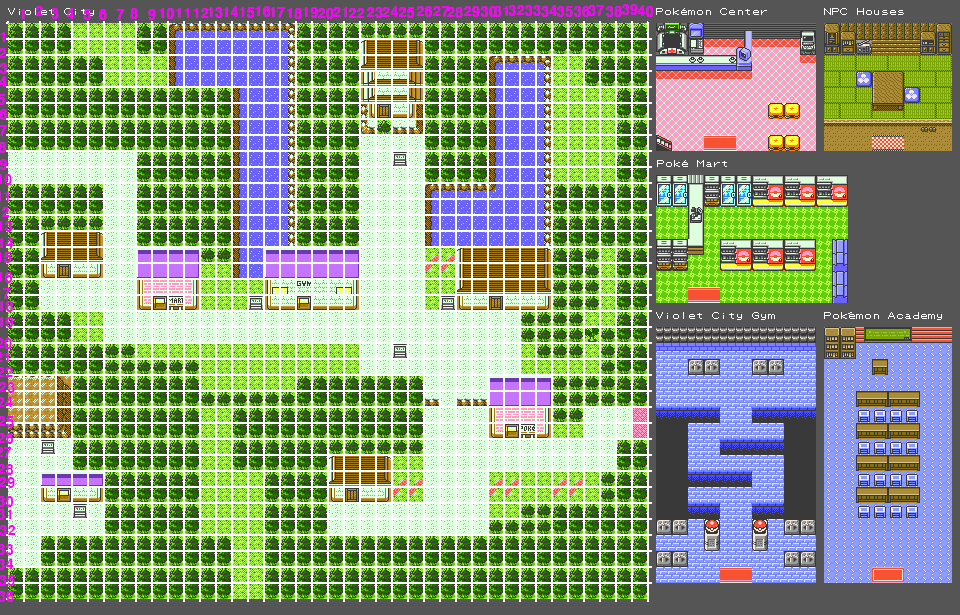
<style>
.page{position:relative;width:960px;height:615px}
.page>*{position:absolute;margin:0}
.t1{font:13.3px "H2gtrE";color:#fc00ff}
.t2{font:13.3px "H2gtrE";color:#e117e4}
</style>
<div class="page">
<p class="t1" style="left:35px;top:6px;width:8px;height:10px">2</p>
<p class="t1" style="left:223px;top:6px;width:15px;height:11px">14</p>
<p class="t1" style="left:255px;top:6px;width:16px;height:11px">16</p>
<p class="t1" style="left:382px;top:6px;width:16px;height:11px">24</p>
<p class="t1" style="left:416px;top:6px;width:16px;height:11px">26</p>
<p class="t1" style="left:433px;top:6px;width:16px;height:11px">27</p>
<p class="t1" style="left:464px;top:6px;width:16px;height:11px">29</p>
<p class="t1" style="left:481px;top:6px;width:16px;height:11px">30</p>
<p class="t1" style="left:494px;top:6px;width:14px;height:11px">31</p>
<p class="t1" style="left:508px;top:5px;width:17px;height:11px">32</p>
<p class="t1" style="left:525px;top:5px;width:16px;height:11px">33</p>
<p class="t1" style="left:541px;top:5px;width:16px;height:12px">34</p>
<p class="t1" style="left:557px;top:6px;width:16px;height:11px">35</p>
<p class="t1" style="left:574px;top:6px;width:16px;height:11px">36</p>
<p class="t1" style="left:588px;top:5px;width:16px;height:11px">37</p>
<p class="t1" style="left:606px;top:6px;width:16px;height:11px">38</p>
<p class="t1" style="left:622px;top:4px;width:16px;height:11px">39</p>
<p class="t1" style="left:637px;top:5px;width:17px;height:12px">40</p>
<p class="t1" style="left:19px;top:9px;width:6px;height:10px">1</p>
<p class="t1" style="left:51px;top:8px;width:8px;height:11px">3</p>
<p class="t1" style="left:66px;top:8px;width:8px;height:11px">4</p>
<p class="t1" style="left:83px;top:9px;width:8px;height:11px">5</p>
<p class="t1" style="left:99px;top:9px;width:8px;height:11px">6</p>
<p class="t1" style="left:116px;top:9px;width:8px;height:11px">7</p>
<p class="t1" style="left:130px;top:8px;width:8px;height:11px">8</p>
<p class="t1" style="left:148px;top:9px;width:8px;height:11px">9</p>
<p class="t1" style="left:159px;top:8px;width:15px;height:11px">10</p>
<p class="t1" style="left:176px;top:8px;width:14px;height:10px">11</p>
<p class="t1" style="left:193px;top:8px;width:16px;height:10px">12</p>
<p class="t1" style="left:207px;top:7px;width:16px;height:11px">13</p>
<p class="t1" style="left:239px;top:7px;width:16px;height:11px">15</p>
<p class="t1" style="left:269px;top:7px;width:16px;height:11px">17</p>
<p class="t1" style="left:287px;top:8px;width:15px;height:11px">18</p>
<p class="t1" style="left:302px;top:7px;width:16px;height:11px">19</p>
<p class="t1" style="left:318px;top:8px;width:16px;height:11px">20</p>
<p class="t1" style="left:333px;top:7px;width:14px;height:10px">21</p>
<p class="t1" style="left:349px;top:8px;width:16px;height:10px">22</p>
<p class="t1" style="left:367px;top:7px;width:16px;height:11px">23</p>
<p class="t1" style="left:399px;top:7px;width:16px;height:11px">25</p>
<p class="t1" style="left:447px;top:7px;width:16px;height:11px">28</p>
<p class="t1" style="left:0px;top:32px;width:6px;height:10px">1</p>
<p class="t1" style="left:0px;top:48px;width:6px;height:10px">2</p>
<p class="t1" style="left:0px;top:63px;width:7px;height:11px">3</p>
<p class="t1" style="left:0px;top:76px;width:7px;height:11px">4</p>
<p class="t1" style="left:0px;top:94px;width:5px;height:11px">5</p>
<p class="t1" style="left:0px;top:109px;width:7px;height:11px">6</p>
<p class="t1" style="left:0px;top:125px;width:7px;height:11px">7</p>
<p class="t2" style="left:0px;top:142px;width:6px;height:11px">8</p>
<p class="t1" style="left:0px;top:159px;width:7px;height:11px">9</p>
<p class="t1" style="left:0px;top:237px;width:14px;height:11px">14</p>
<p class="t1" style="left:0px;top:301px;width:14px;height:11px">18</p>
<p class="t1" style="left:0px;top:317px;width:14px;height:11px">19</p>
<p class="t1" style="left:0px;top:382px;width:15px;height:11px">23</p>
<p class="t1" style="left:0px;top:416px;width:14px;height:11px">25</p>
<p class="t1" style="left:0px;top:477px;width:15px;height:11px">29</p>
<p class="t1" style="left:0px;top:525px;width:16px;height:11px">32</p>
<p class="t1" style="left:0px;top:575px;width:15px;height:11px">35</p>
<p class="t1" style="left:0px;top:591px;width:14px;height:11px">36</p>
</div>
